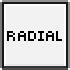
<style>
.page{position:relative;width:70px;height:70px;background:#f2f2f2}
.page>*{position:absolute;margin:0}
.t1{font:10px "Pixel";letter-spacing:0.005em;color:#000000}
</style>
<div class="page">
<p class="t1" style="left:7px;top:31px;width:55px;height:10px">radial</p>
</div>
